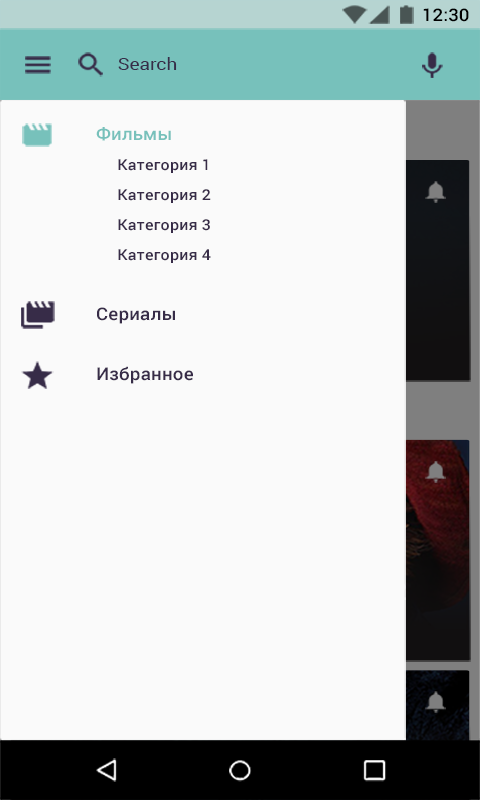
<style>
.page{position:relative;width:480px;height:800px;background:#fafafa}
.page>*{position:absolute;margin:0}
.t1{font:17.5px "Roboto-Medium";color:#000000;scale:1.07 1}
.t2{font:17.5px "Roboto-Regular";letter-spacing:0.01em;color:#372c48;scale:1.07 1}
.t3{font:17.5px "Roboto-Medium";letter-spacing:0.005em;color:#77c1bb;scale:1.07 1}
.t4{font:15px "Roboto-Medium";letter-spacing:0.005em;color:#372c48;scale:1.07 1}
.t5{font:17.5px "Roboto-Medium";letter-spacing:0.005em;color:#372c48;scale:1.07 1}
</style>
<div class="page">
<p class="t1" style="left:423px;top:8px;width:46px;height:14px">12:30</p>
<p class="t2" style="left:118px;top:57px;width:59px;height:13px">Search</p>
<p class="t3" style="left:96px;top:127px;width:75px;height:14px">Фильмы</p>
<p class="t4" style="left:118px;top:159px;width:90px;height:14px">Категория 1</p>
<p class="t4" style="left:118px;top:189px;width:93px;height:14px">Категория 2</p>
<p class="t4" style="left:118px;top:219px;width:92px;height:14px">Категория 3</p>
<p class="t4" style="left:118px;top:249px;width:93px;height:14px">Категория 4</p>
<p class="t5" style="left:97px;top:307px;width:78px;height:17px">Сериалы</p>
<p class="t5" style="left:97px;top:366px;width:96px;height:18px">Избранное</p>
</div>
